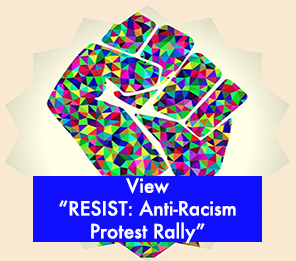
<style>
.page{position:relative;width:296px;height:261px;background:#f9e9d0}
.page>*{position:absolute;margin:0}
.t1{font:19px "Futura-Medium";color:#ffffff}
</style>
<div class="page">
<p class="t1" style="left:59px;top:178px;width:177px;height:66px;text-align:center">View<br>“RESIST: Anti-Racism<br>Protest Rally”</p>
</div>
